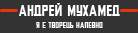
<style>
.page{position:relative;width:138px;height:33px;background:#333333}
.page>*{position:absolute;margin:0}
.t1{font:15px "Tschichold-Bold";color:#ffffff;text-transform:uppercase}
.t2{font:8px "Tschichold-Bold";color:#ffffff;text-transform:uppercase}
</style>
<div class="page">
<p class="t1" style="left:19px;top:3px;width:101px;height:13px">Андрей мухамед</p>
<p class="t2" style="left:36px;top:22px;width:67px;height:6px">Я є творець напевно</p>
</div>
